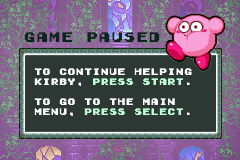
<style>
.page{position:relative;width:240px;height:160px;background:#2d3834}
.page>*{position:absolute;margin:0}
.t1{font:12.5px "GamegirlClassic";color:#0a271c}
.t2{font:8.3px "GamegirlClassic";color:#ffffff}
.t3{font:8.3px "GamegirlClassic";color:#c0ffd6}
</style>
<div class="page">
<p class="t1" style="left:24px;top:32px;width:136px;height:10px">GAME PAUSED</p>
<p class="t2" style="left:34px;top:68px;width:158px;height:48px">TO CONTINUE HELPING<br>KIRBY, <span class="t3">PRESS START</span>.<br><br>TO GO TO THE MAIN<br>MENU, <span class="t3">PRESS SELECT</span>.</p>
</div>
